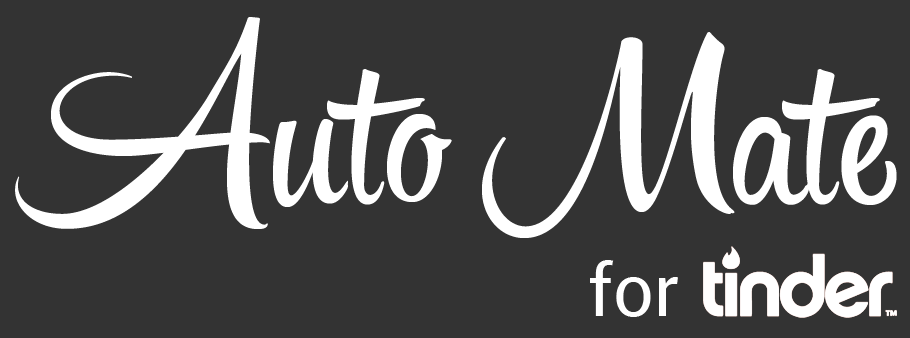
<style>
.page{position:relative;width:910px;height:338px;background:#333333}
.page>*{position:absolute;margin:0}
.t1{font:200px "HipsterScriptPro";color:#ffffff}
.t2{font:72px "Roboto-Regular";color:#ffffff}
</style>
<div class="page">
<p class="t1" style="left:15px;top:17px;width:882px;height:221px">Auto Mate</p>
<p class="t2" style="left:590px;top:260px;width:88px;height:57px">for</p>
</div>
